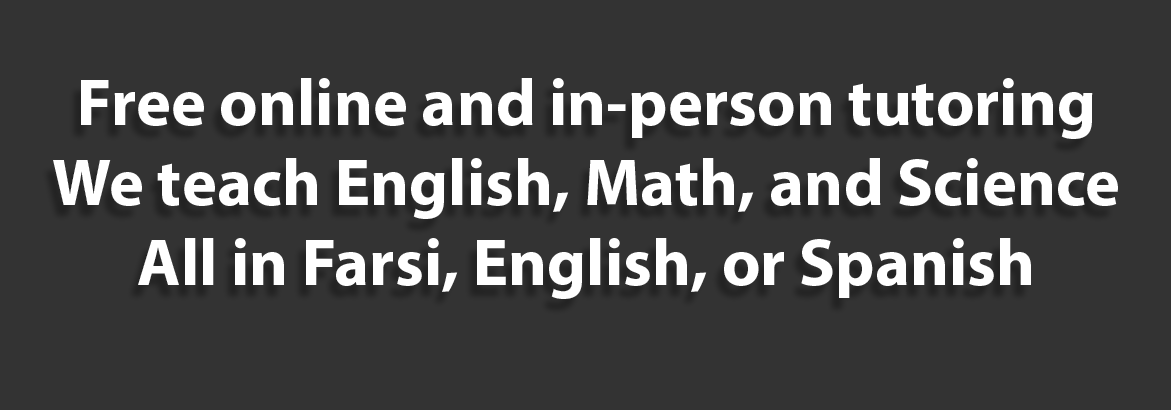
<style>
.page{position:relative;width:1171px;height:410px;background:#333333}
.page>*{position:absolute;margin:0}
.t1{font:66.7px "MyriadPro-Bold";color:#ffffff}
</style>
<div class="page">
<p class="t1" style="left:53px;top:78px;width:1065px;height:221px;text-align:center">Free online and in-person tutoring<br>We teach English, Math, and Science<br>All in Farsi, English, or Spanish</p>
</div>
